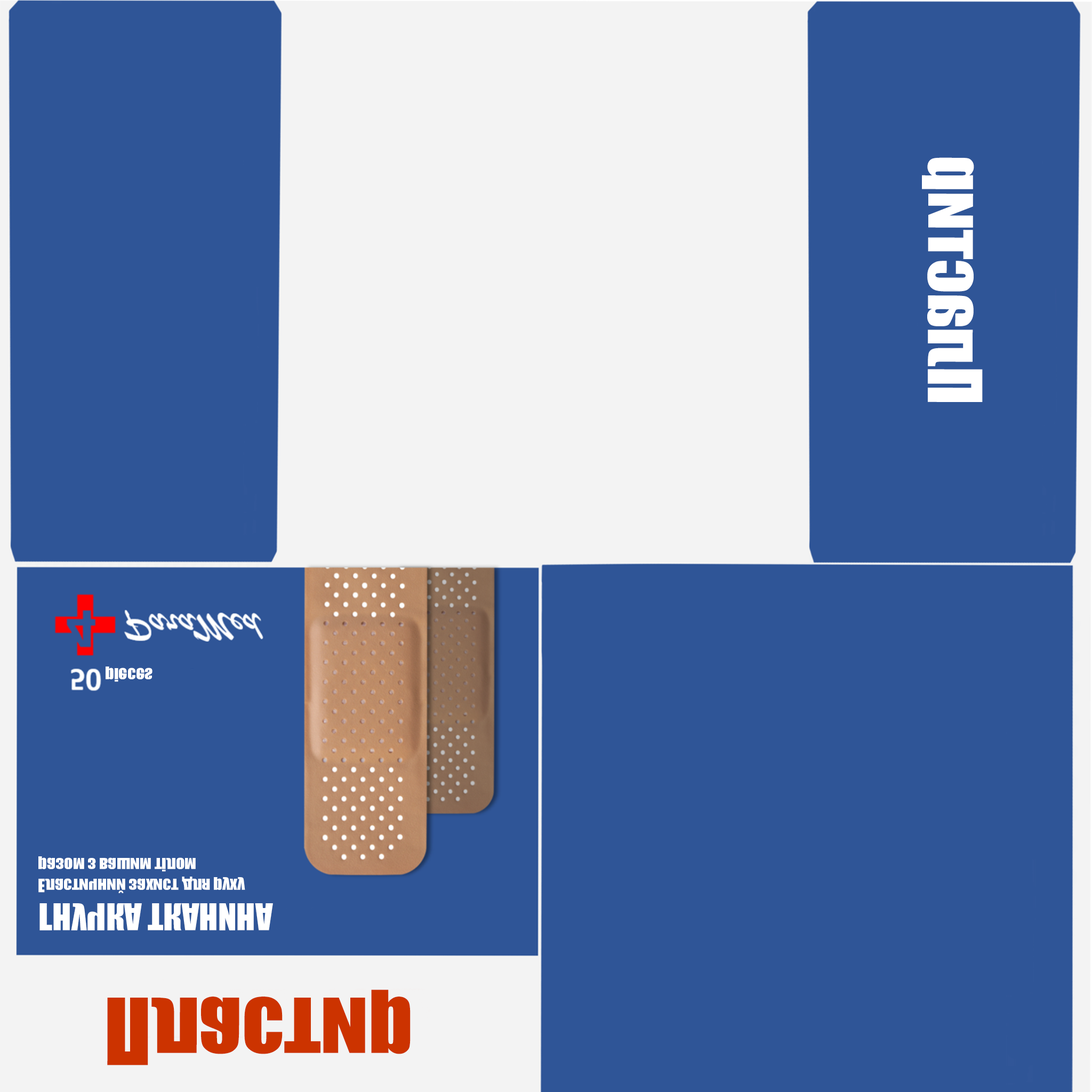
<style>
.page{position:relative;width:1092px;height:1092px;background:#2f5597}
.page>*{position:absolute;margin:0}
.t1{font:68.8px "Impact";color:#ffffff}
.t2{font:17.1px "Impact";color:#ffffff}
.t3{font:34.1px "Impact";color:#ffffff}
.t4{font:85.2px "Impact";color:#cc3300}
</style>
<div class="page">
<p class="t1" style="left:922px;top:157px;width:61px;height:245px;rotate:-90deg">Пластир</p>
<p class="t2" style="left:106px;top:666px;width:46px;height:16px">pieces</p>
<p class="t2" style="left:38px;top:856px;width:207px;height:37px">Еластичний захист для руху разом з вашим тілом</p>
<p class="t3" style="left:39px;top:903px;width:234px;height:27px">ГНУЧКА ТКАНИНА</p>
<p class="t4" style="left:107px;top:990px;width:304px;height:75px">Пластир</p>
</div>
